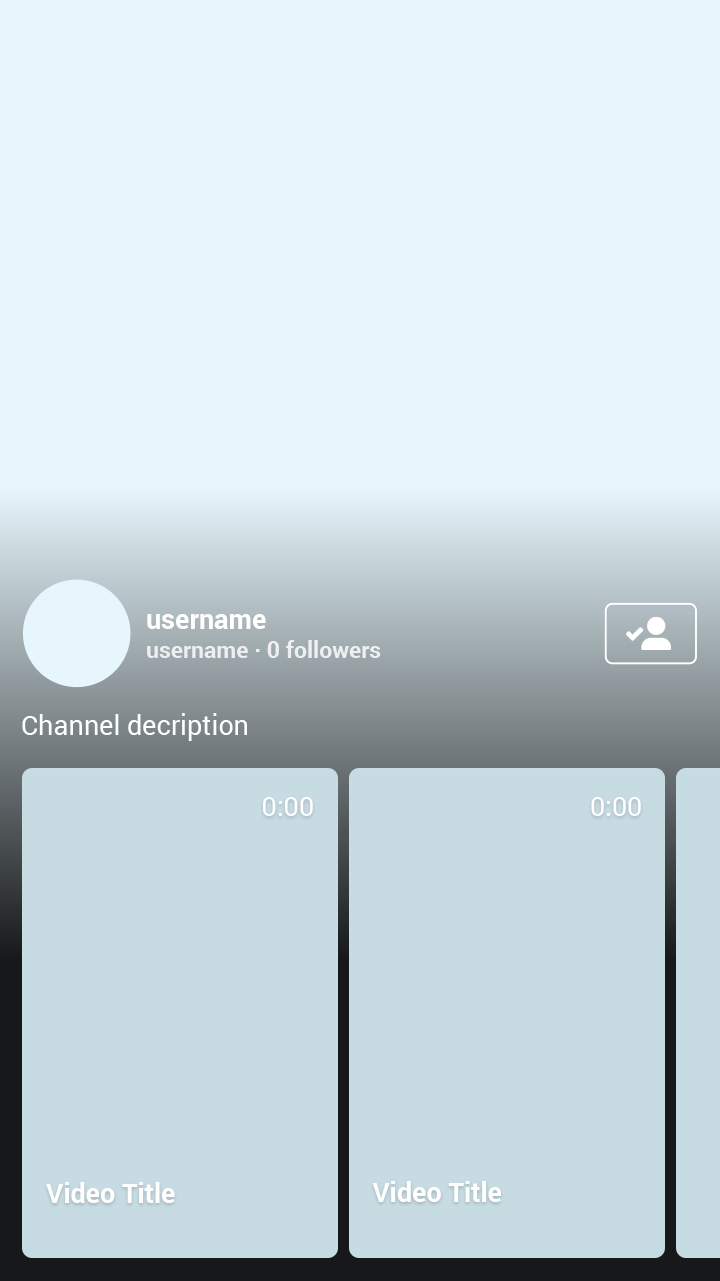
<style>
.page{position:relative;width:720px;height:1281px;background:#e6f6fc}
.page>*{position:absolute;margin:0}
.t1{font:27px "Roboto-Bold";color:#ffffff}
.t2{font:23px "Roboto-Bold";color:#ffffff}
.t3{font:27px "Roboto-Regular";color:#ffffff}
</style>
<div class="page">
<p class="t1" style="left:147px;top:614px;width:119px;height:15px">username</p>
<p class="t2" style="left:147px;top:640px;width:234px;height:18px;opacity:0.8">username · 0 followers</p>
<p class="t3" style="left:22px;top:713px;width:225px;height:28px">Channel decription</p>
<p class="t3" style="left:263px;top:797px;width:50px;height:19px">0:00</p>
<p class="t3" style="left:591px;top:797px;width:50px;height:19px">0:00</p>
<p class="t1" style="left:46px;top:1182px;width:129px;height:21px">Video Title</p>
<p class="t1" style="left:372px;top:1181px;width:129px;height:21px">Video Title</p>
</div>
